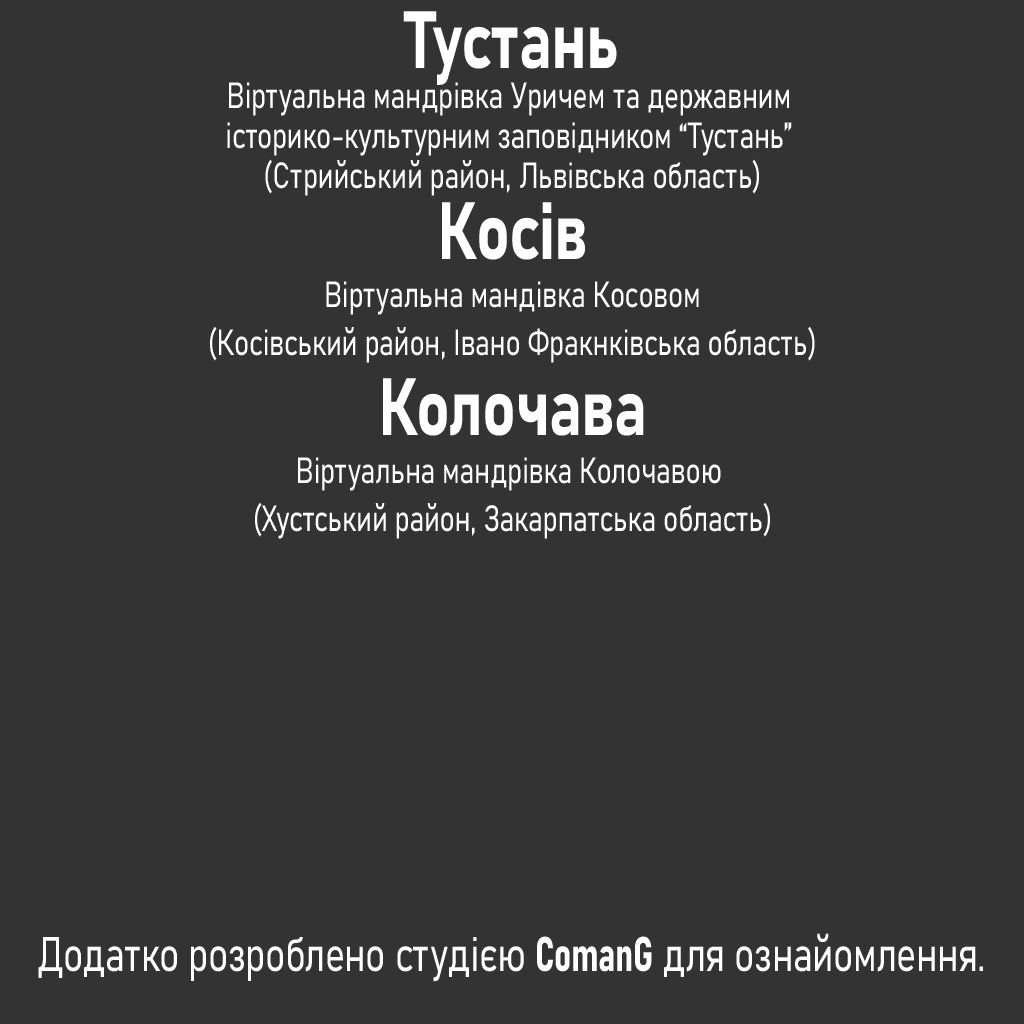
<style>
.page{position:relative;width:1024px;height:1024px;background:#333333}
.page>*{position:absolute;margin:0}
.t1{font:36px/40px "Bahnschrift-SemiLight";letter-spacing:-0.015em;color:#ffffff;font-weight:bold;scale:0.78 1}
.t2{font:80px/40px "Bahnschrift-Bold";letter-spacing:-0.015em;color:#ffffff;font-weight:bold;scale:0.78 1}
.t3{font:36px/48px "Bahnschrift-SemiLight";letter-spacing:-0.015em;color:#ffffff;font-weight:bold;scale:0.78 1}
.t4{font:48px "Bahnschrift-SemiLight";letter-spacing:-0.015em;color:#ffffff;font-weight:bold;scale:0.78 1}
.t5{font:48px "Bahnschrift-BoldSemiCondensed";letter-spacing:-0.015em;color:#ffffff;font-weight:bold;scale:0.78 1}
</style>
<div class="page">
<p class="t1" style="left:227px;top:11px;width:565px;height:185px;text-align:center"><span class="t2">Тустань<br></span>Віртуальна мандрівка Уричем та державним <br>історико-культурним заповідником “Тустань” <br>(Стрийський район, Львівська область)</p>
<p class="t3" style="left:210px;top:202px;width:605px;height:161px;text-align:center"><span class="t2">Косів<br></span>Віртуальна мандівка Косовом<br>(Косівський район, Івано Фракнківська область)</p>
<p class="t3" style="left:255px;top:378px;width:515px;height:161px;text-align:center"><span class="t2">Колочава<br></span>Віртуальна мандрівка Колочавою <br>(Хустський район, Закарпатська область)</p>
<p class="t4" style="left:38px;top:933px;width:945px;height:49px">Додатко розроблено студією <span class="t5">ComanG</span> для ознайомлення.</p>
</div>
